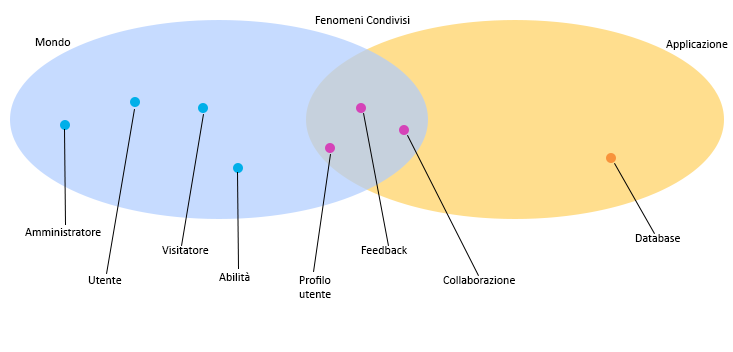
<style>
.page{position:relative;width:733px;height:352px;background:#ffffff}
.page>*{position:absolute;margin:0}
.t1{font:12px "Calibri";color:#000000}
</style>
<div class="page">
<p class="t1" style="left:315px;top:16px;width:95px;height:8px">Fenomeni Condivisi</p>
<p class="t1" style="left:35px;top:38px;width:36px;height:8px">Mondo</p>
<p class="t1" style="left:666px;top:40px;width:62px;height:10px">Applicazione</p>
<p class="t1" style="left:25px;top:228px;width:76px;height:8px">Amministratore</p>
<p class="t1" style="left:162px;top:246px;width:47px;height:8px">Visitatore</p>
<p class="t1" style="left:361px;top:246px;width:47px;height:8px">Feedback</p>
<p class="t1" style="left:635px;top:234px;width:45px;height:8px">Database</p>
<p class="t1" style="left:88px;top:276px;width:34px;height:8px">Utente</p>
<p class="t1" style="left:219px;top:272px;width:31px;height:9px">Abilità</p>
<p class="t1" style="left:299px;top:276px;width:32px;height:22px">Profilo<br>utente</p>
<p class="t1" style="left:443px;top:276px;width:72px;height:8px">Collaborazione</p>
</div>
